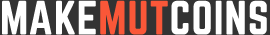
<style>
.page{position:relative;width:270px;height:35px;background:#333333}
.page>*{position:absolute;margin:0}
.t1{font:42px "Norwester-Regular";letter-spacing:0.025em;color:#ffffff}
.t2{font:42px "Norwester-Regular";letter-spacing:0.025em;color:#fa5738}
</style>
<div class="page">
<p class="t1" style="left:2px;top:0px;width:265px;height:35px">MAKE<span class="t2">MUT</span>COINS</p>
</div>
